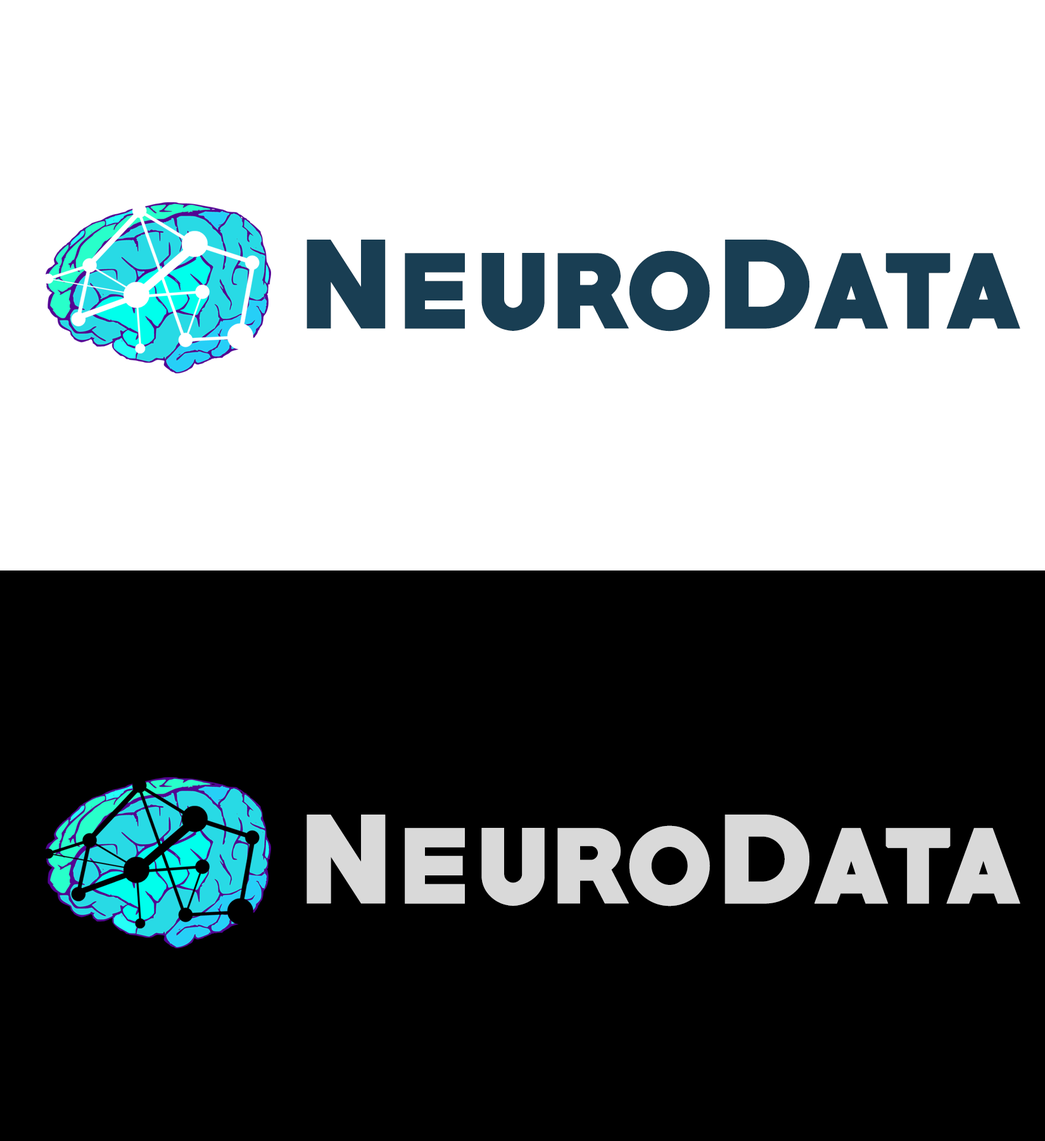
<style>
.page{position:relative;width:1045px;height:1141px;background:#ffffff}
.page>*{position:absolute;margin:0}
.t1{font:114.1px "PRIMETIME-Regular";letter-spacing:0.01em;color:#193e53;font-weight:bold}
.t2{font:114.1px "PRIMETIME-Regular";letter-spacing:0.01em;color:#d9d9d9;font-weight:bold}
</style>
<div class="page">
<p class="t1" style="left:307px;top:240px;width:714px;height:91px">NeuroData</p>
<p class="t2" style="left:307px;top:814px;width:714px;height:92px">NeuroData</p>
</div>
